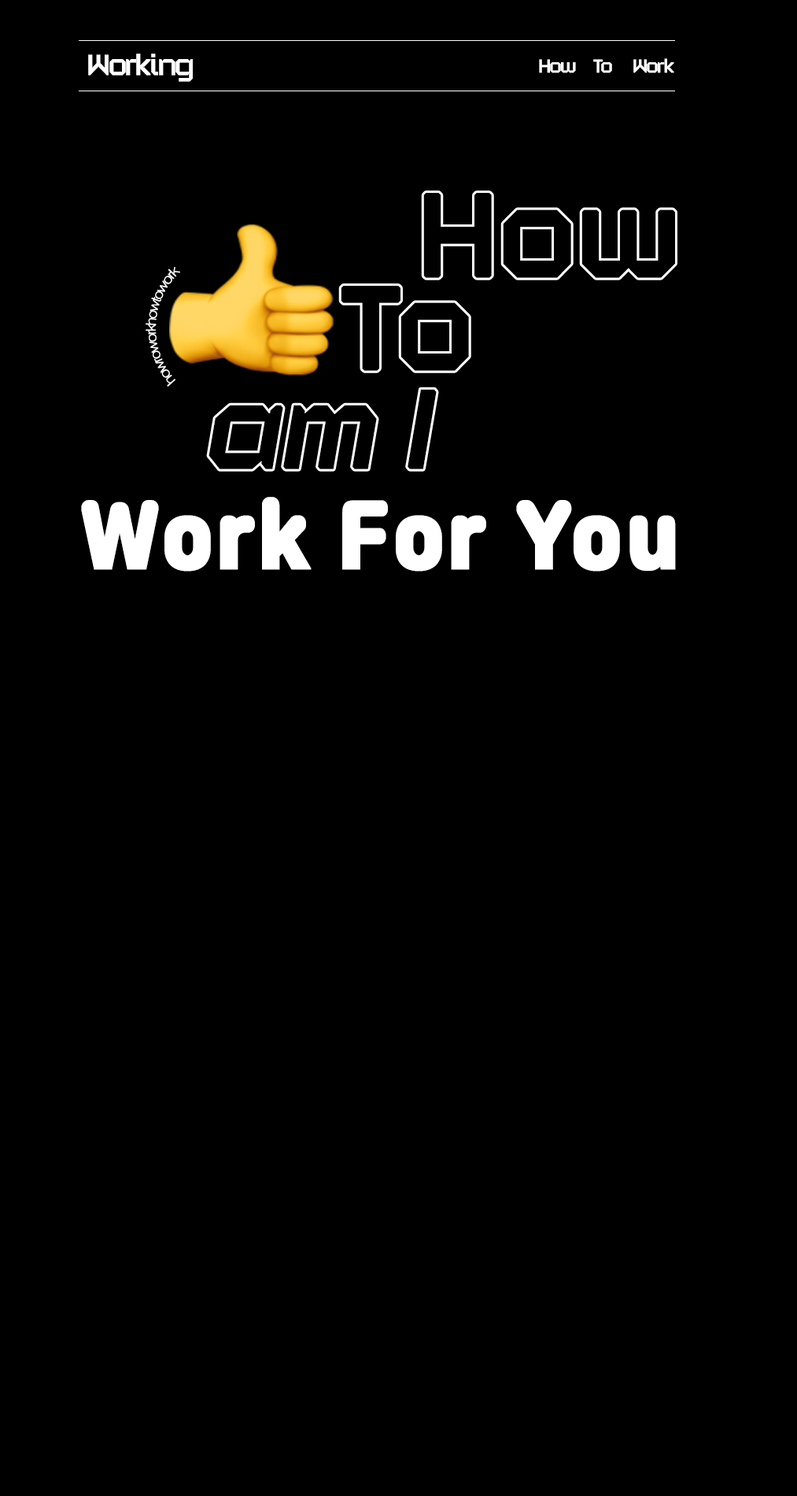
<style>
.page{position:relative;width:797px;height:1496px;background:#000000}
.page>*{position:absolute;margin:0}
.t1{font:26.5px "Alloy";letter-spacing:-0.05em;color:#ffffff;font-weight:bold;scale:0.97 1}
.t2{font:17.2px "Alloy";letter-spacing:-0.05em;color:#ffffff;font-weight:bold;scale:0.96 1}
.t3{font:13.5px "Gulim";letter-spacing:-0.13em;color:#ffffff}
.t4{font:84.1px "JalnanOTF";letter-spacing:0.04em;color:#ffffff;font-weight:bold;scale:0.9 1}
</style>
<div class="page">
<p class="t1" style="left:88px;top:54px;width:105px;height:28px">Working</p>
<p class="t2" style="left:539px;top:58px;width:136px;height:15px">How     To      Work</p>
<p class="t3" style="left:146px;top:267px;width:34px;height:119px;rotate:-88deg">howroworkhowtowork</p>
<p class="t4" style="left:81px;top:497px;width:595px;height:74px">Work For You</p>
</div>
